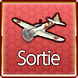
<style>
.page{position:relative;width:78px;height:78px}
.page>*{position:absolute;margin:0}
.t1{font:18px "UDShinGoPro-Regular";letter-spacing:-0.04em;color:#ffffff;scale:0.9 1}
</style>
<div class="page">
<p class="t1" style="left:17px;top:50px;width:43px;height:16px">Sortie</p>
</div>
